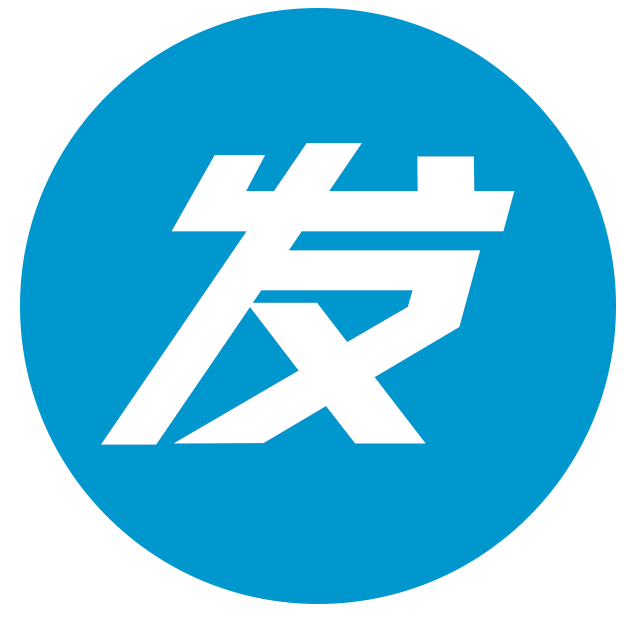
<style>
.page{position:relative;width:624px;height:624px;background:#0096ce}
.page>*{position:absolute;margin:0}
.t1{font:363.9px "inpinnanzhengbeizhanNZBZti";color:#ffffff}
</style>
<div class="page">
<p class="t1" style="left:101px;top:143px;width:414px;height:302px">发</p>
</div>
